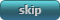
<style>
.page{position:relative;width:60px;height:20px}
.page>*{position:absolute;margin:0}
.t1{font:11px "Tahoma-Bold";color:#c0c2c5}
</style>
<div class="page">
<p class="t1" style="left:19px;top:5px;width:23px;height:11px">skip</p>
</div>
